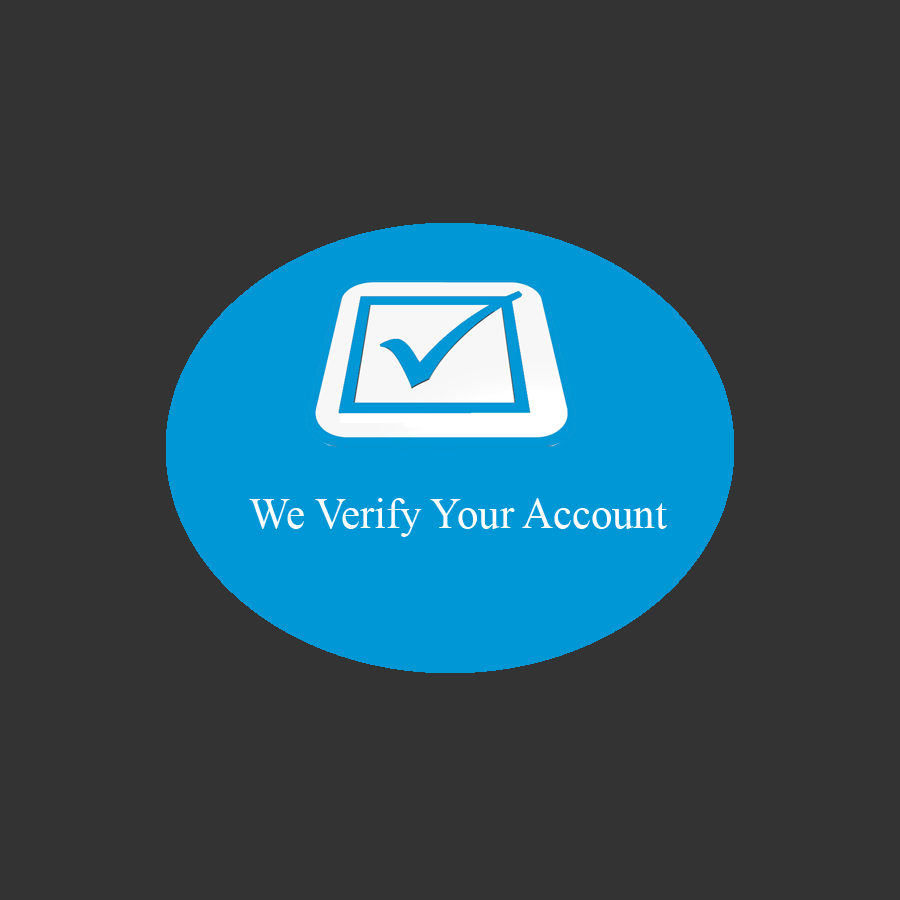
<style>
.page{position:relative;width:900px;height:900px;background:#333333}
.page>*{position:absolute;margin:0}
.t1{font:42.7px "TimesNewRomanPSMT";color:#ffffff}
</style>
<div class="page">
<p class="t1" style="left:249px;top:498px;width:418px;height:39px">We Verify Your Account</p>
</div>
